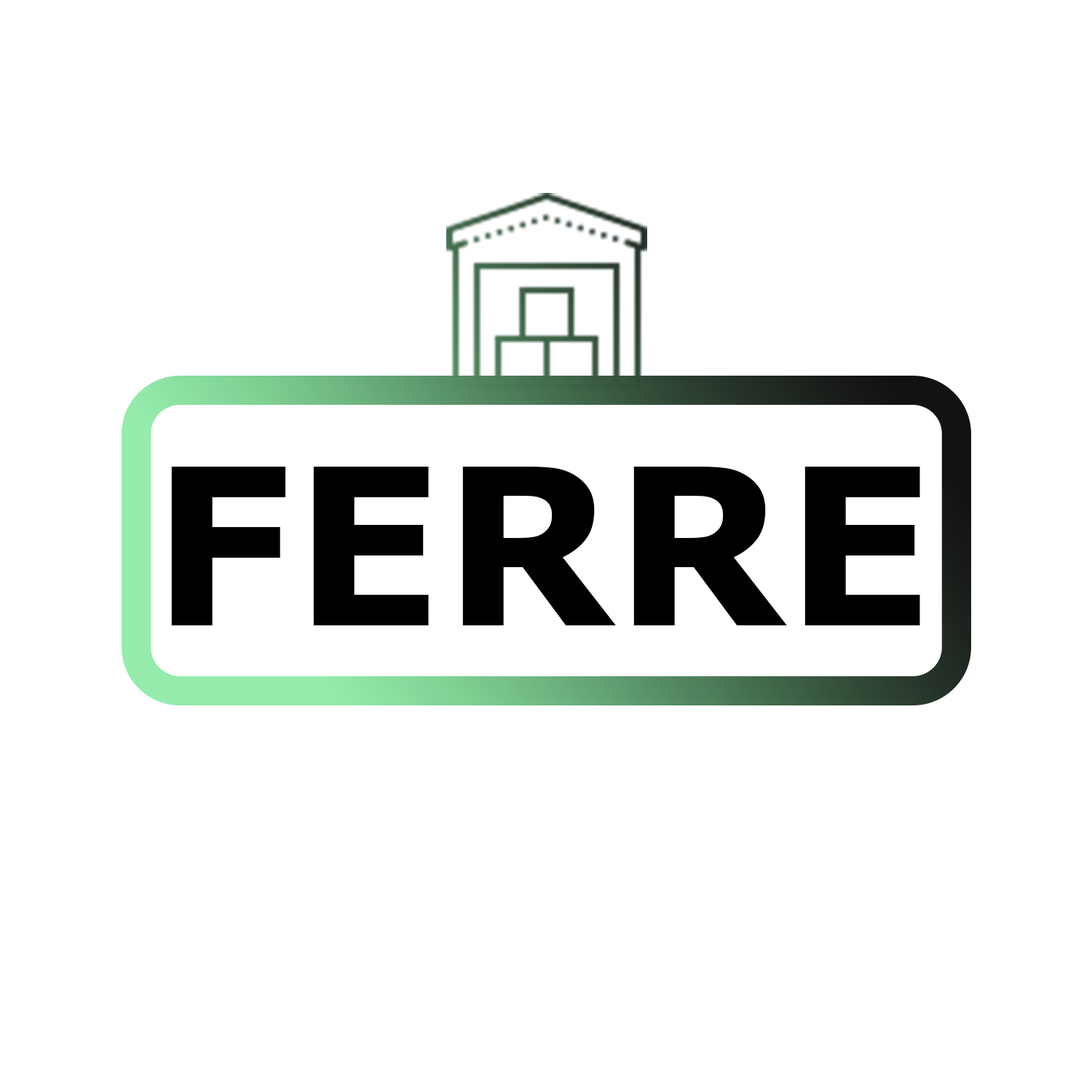
<style>
.page{position:relative;width:1092px;height:1092px;background:#ffffff}
.page>*{position:absolute;margin:0}
.t1{font:218.4px "Verdana-Bold";color:#000000}
</style>
<div class="page">
<p class="t1" style="left:171px;top:467px;width:749px;height:158px">FERRE</p>
</div>
